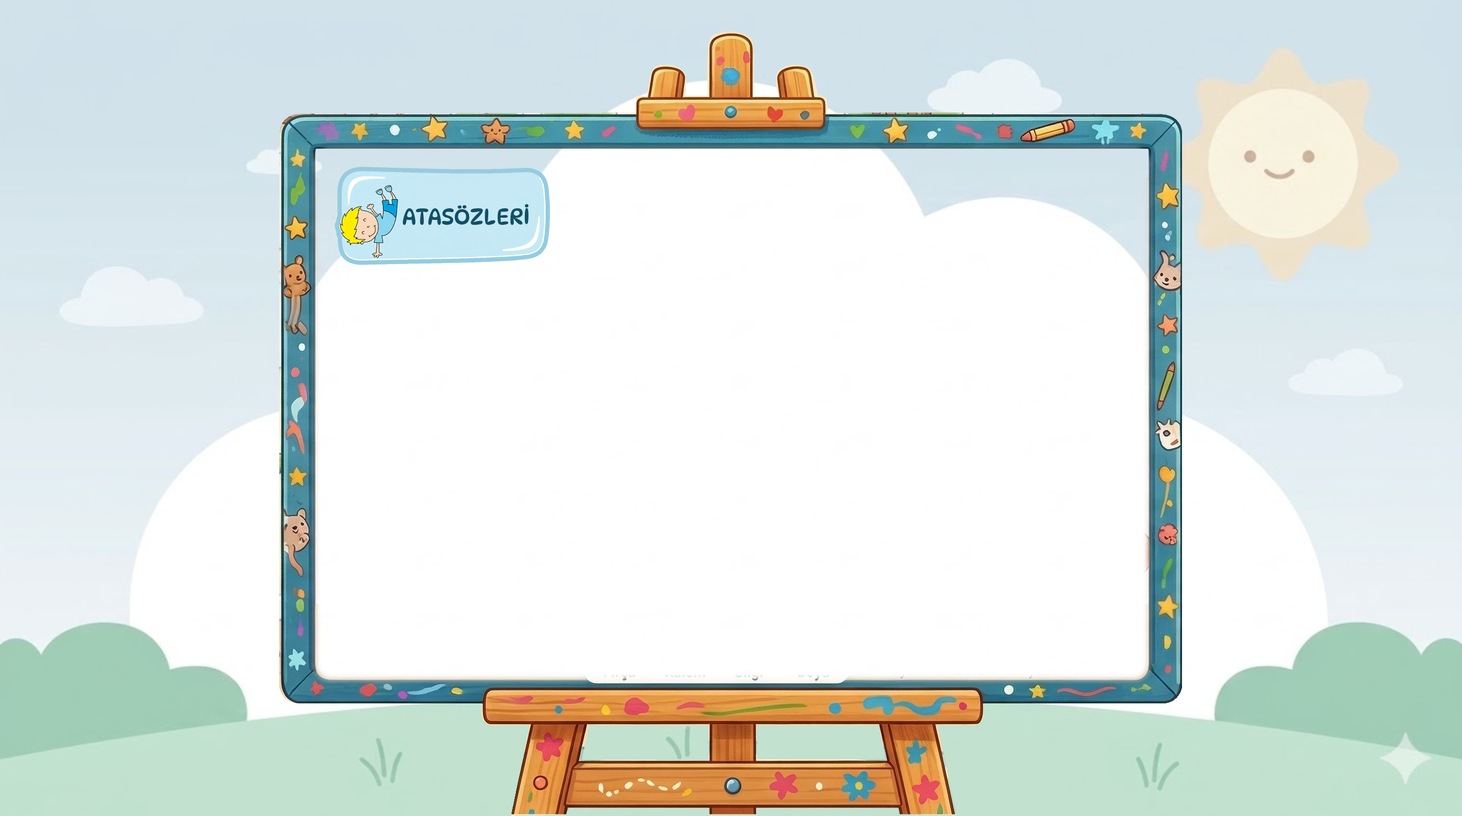
<style>
.page{position:relative;width:1462px;height:816px;background:#ffffff}
.page>*{position:absolute;margin:0}
.t1{font:22.3px "DynaPuff-Regular";color:#124f65}
</style>
<div class="page">
<p class="t1" style="left:403px;top:204px;width:125px;height:21px">ATASÖZLERİ</p>
</div>
